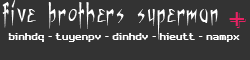
<style>
.page{position:relative;width:250px;height:60px;background:#333333}
.page>*{position:absolute;margin:0}
.t1{font:36px "Algerian";color:#e62263}
.t2{font:10px "6809Chargen";color:#ffffff}
</style>
<div class="page">
<p class="t1" style="left:229px;top:12px;width:17px;height:16px">+</p>
<p class="t2" style="left:8px;top:33px;width:232px;height:9px">binhdq - tuyenpv - dinhdv - hieutt - nampx</p>
</div>
